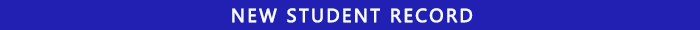
<style>
.page{position:relative;width:700px;height:30px;background:#221fb3}
.page>*{position:absolute;margin:0}
.t1{font:18.8px "MicrosoftNewTaiLue";letter-spacing:0.1em;color:#f4fafe;font-weight:bold}
</style>
<div class="page">
<p class="t1" style="left:232px;top:8px;width:241px;height:15px">NEW STUDENT RECORD</p>
</div>
